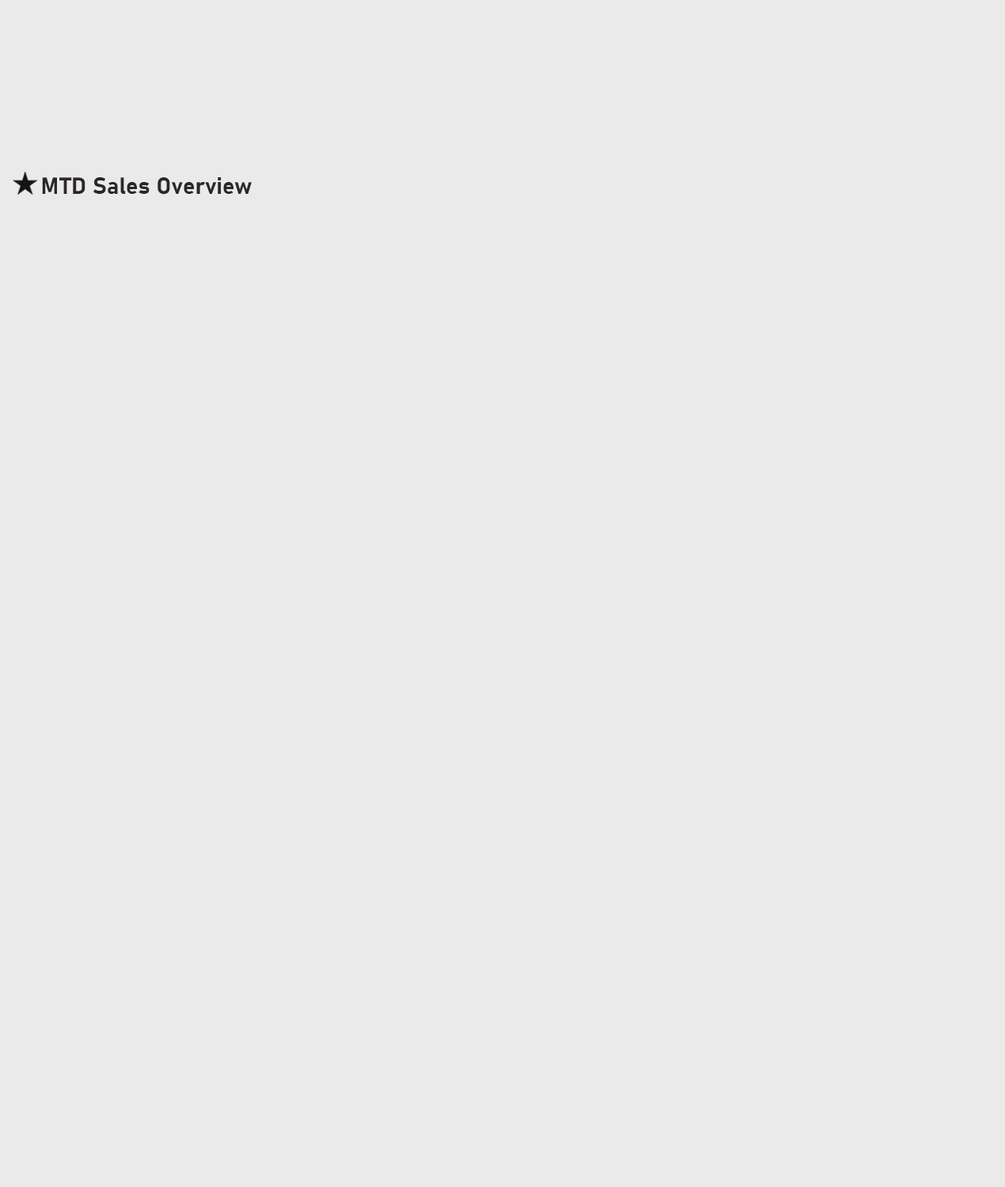
<style>
.page{position:relative;width:1005px;height:1187px;background:#eaeaea}
.page>*{position:absolute;margin:0}
.t1{font:23.1px "Bahnschrift-Bold";color:#2c2727}
</style>
<div class="page">
<p class="t1" style="left:42px;top:177px;width:210px;height:18px">MTD Sales Overview</p>
</div>
